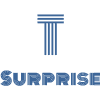
<style>
.page{position:relative;width:100px;height:100px;background:#ffffff}
.page>*{position:absolute;margin:0}
.t1{font:17px/30px "Monoton-Regular";letter-spacing:0.04em;color:#3d6698}
.t2{font:50px/30px "Monoton-Regular";letter-spacing:0.04em;color:#3d6698}
</style>
<div class="page">
<p class="t1" style="left:0px;top:14px;width:101px;height:72px;text-align:center"><span class="t2">T<br></span>Surprise</p>
</div>
